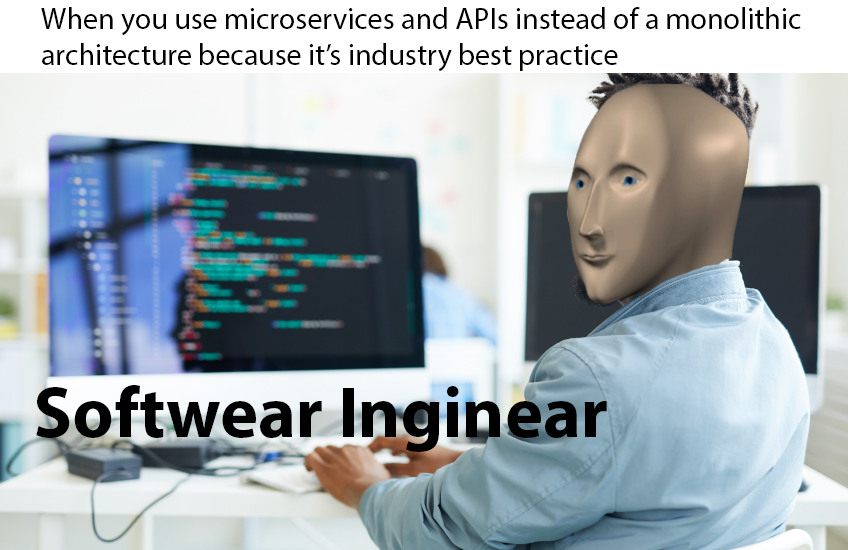
<style>
.page{position:relative;width:848px;height:550px}
.page>*{position:absolute;margin:0}
.t1{font:30px "MyriadPro-Regular";color:#000000}
.t2{font:72px "MyriadPro-Bold";color:#000000}
</style>
<div class="page">
<p class="t1" style="left:41px;top:7px;width:760px;height:65px">When you use microservices and APIs instead of a monolithic architecture because it’s industry best practice</p>
<p class="t2" style="left:36px;top:385px;width:571px;height:67px">Softwear Inginear</p>
</div>
